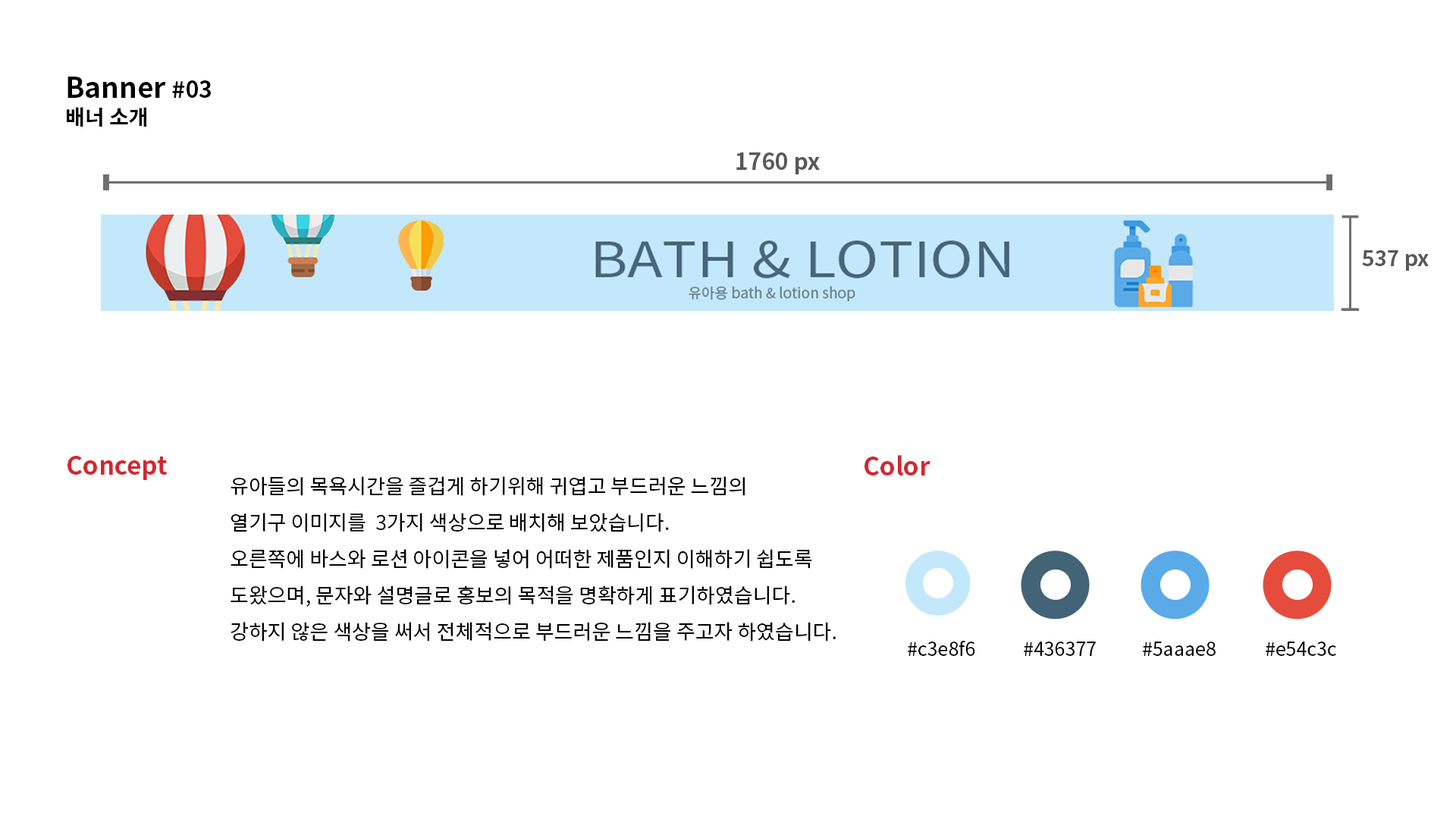
<style>
.page{position:relative;width:1456px;height:819px;background:#ffffff}
.page>*{position:absolute;margin:0}
.t1{font:28.1px/27.3px "NotoSansCJKkr-Bold";color:#000000}
.t2{font:22.7px/27.3px "NotoSansCJKkr-Bold";color:#000000}
.t3{font:21.2px/27.3px "NotoSansCJKkr-Bold";color:#000000}
.t4{font:22.7px "NotoSansCJKkr-Bold";color:#585858}
.t5{font:21.2px "NotoSansCJKkr-Bold";color:#585858}
.t6{font:25px "NotoSansCJKkr-Bold";color:#d12830}
.t7{font:20.5px/36.4px "NotoSansCJKkr-Regular";color:#000000}
.t8{font:19px "NotoSansCJKkr-Regular";color:#000000}
</style>
<div class="page">
<p class="t1" style="left:67px;top:77px;width:144px;height:50px">Banner <span class="t2">#03<br></span><span class="t3">배너 소개</span></p>
<p class="t4" style="left:736px;top:152px;width:84px;height:22px">1760 px</p>
<p class="t5" style="left:1362px;top:250px;width:67px;height:21px">537 px</p>
<p class="t6" style="left:67px;top:456px;width:100px;height:24px">Concept</p>
<p class="t6" style="left:864px;top:455px;width:66px;height:20px">Color</p>
<p class="t7" style="left:231px;top:476px;width:605px;height:166px">유아들의 목욕시간을 즐겁게 하기위해 귀엽고 부드러운 느낌의  <br>열기구 이미지를  3가지 색상으로 배치해 보았습니다. <br>오른쪽에 바스와 로션 아이콘을 넣어 어떠한 제품인지 이해하기 쉽도록 <br>도왔으며, 문자와 설명글로 홍보의 목적을 명확하게 표기하였습니다.  <br>강하지 않은 색상을 써서 전체적으로 부드러운 느낌을 주고자 하였습니다.</p>
<p class="t8" style="left:908px;top:640px;width:67px;height:16px">#c3e8f6</p>
<p class="t8" style="left:1024px;top:642px;width:72px;height:14px">#436377</p>
<p class="t8" style="left:1143px;top:642px;width:73px;height:14px">#5aaae8</p>
<p class="t8" style="left:1266px;top:642px;width:70px;height:14px">#e54c3c</p>
</div>
